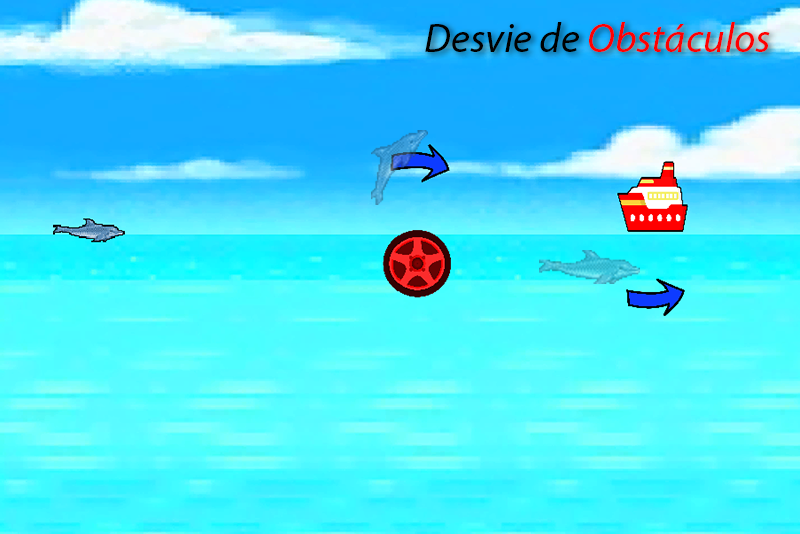
<style>
.page{position:relative;width:800px;height:534px}
.page>*{position:absolute;margin:0}
.t1{font:30.8px "MyriadPro-It";color:#ff0000}
.t2{font:30.8px "MyriadPro-It";color:#000000}
</style>
<div class="page">
<p class="t1" style="left:425px;top:22px;width:345px;height:30px"><span class="t2">Desvie de </span>Obstáculos</p>
</div>
